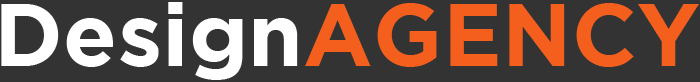
<style>
.page{position:relative;width:700px;height:82px;background:#333333}
.page>*{position:absolute;margin:0}
.t1{font:87.9px "Gotham-Bold";color:#ffffff}
.t2{font:87.9px "Gotham-Bold";color:#f55f1d}
</style>
<div class="page">
<p class="t1" style="left:1px;top:2px;width:698px;height:78px">Design<span class="t2">AGENCY</span></p>
</div>
